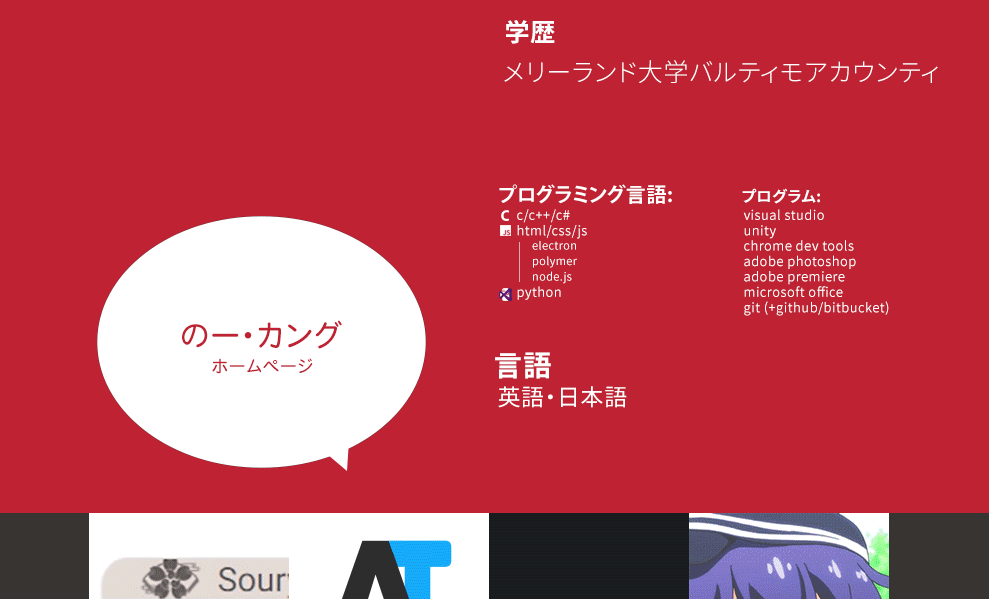
<style>
.page{position:relative;width:989px;height:599px;background:#be2233}
.page>*{position:absolute;margin:0}
.t1{font:25px "NotoSansCJKjp-Bold";letter-spacing:0.03em;color:#ffffff}
.t2{font:25px "NotoSansCJKjp-Light";letter-spacing:0.03em;color:#ffffff}
.t3{font:20px "KozGoPr6N-Bold";letter-spacing:0.03em;color:#ffffff}
.t4{font:15.4px "NotoSansCJKjp-Bold";letter-spacing:0.03em;color:#ffffff}
.t5{font:13px/15.4px "NotoSansCJKjp-Regular";letter-spacing:0.03em;color:#ffffff}
.t6{font:11px/15.4px "NotoSansCJKjp-Regular";letter-spacing:0.03em;color:#ffffff}
.t7{font:29.7px "HeiseiMaruGoStd-W4";letter-spacing:0.03em;color:#be2233}
.t8{font:28.6px "NotoSansCJKjp-Bold";letter-spacing:0.03em;color:#ffffff}
.t9{font:16.9px "HeiseiMaruGoStd-W4";letter-spacing:0.03em;color:#be2233}
.t10{font:23px "NotoSansCJKjp-Regular";letter-spacing:0.03em;color:#ffffff}
</style>
<div class="page">
<p class="t1" style="left:506px;top:20px;width:49px;height:24px">学歴</p>
<p class="t2" style="left:504px;top:60px;width:434px;height:23px">メリーランド大学バルティモアカウンティ</p>
<p class="t3" style="left:499px;top:184px;width:173px;height:20px">プログラミング言語:</p>
<p class="t4" style="left:742px;top:188px;width:78px;height:16px">プログラム:</p>
<p class="t5" style="left:517px;top:209px;width:70px;height:91px">c/c++/c#<br>html/css/js<br>       <br><br><br>python</p>
<p class="t5" style="left:743px;top:209px;width:146px;height:107px">visual studio<br>unity<br>chrome dev tools<br>adobe photoshop<br>adobe premiere<br>microsoft office<br>git (+github/bitbucket)</p>
<p class="t6" style="left:532px;top:241px;width:45px;height:43px">electron<br>polymer<br>node.js</p>
<p class="t7" style="left:182px;top:320px;width:160px;height:29px">のー・カング</p>
<p class="t8" style="left:495px;top:352px;width:56px;height:27px">言語</p>
<p class="t9" style="left:212px;top:358px;width:101px;height:16px">ホームページ</p>
<p class="t10" style="left:498px;top:386px;width:129px;height:22px">英語・日本語</p>
</div>
